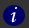
<style>
.page{position:relative;width:29px;height:28px;background:#333333}
.page>*{position:absolute;margin:0}
.t1{font:24px "MonotypeCorsiva";color:#fcfcfe}
</style>
<div class="page">
<p class="t1" style="left:10px;top:7px;width:7px;height:16px">i</p>
</div>
